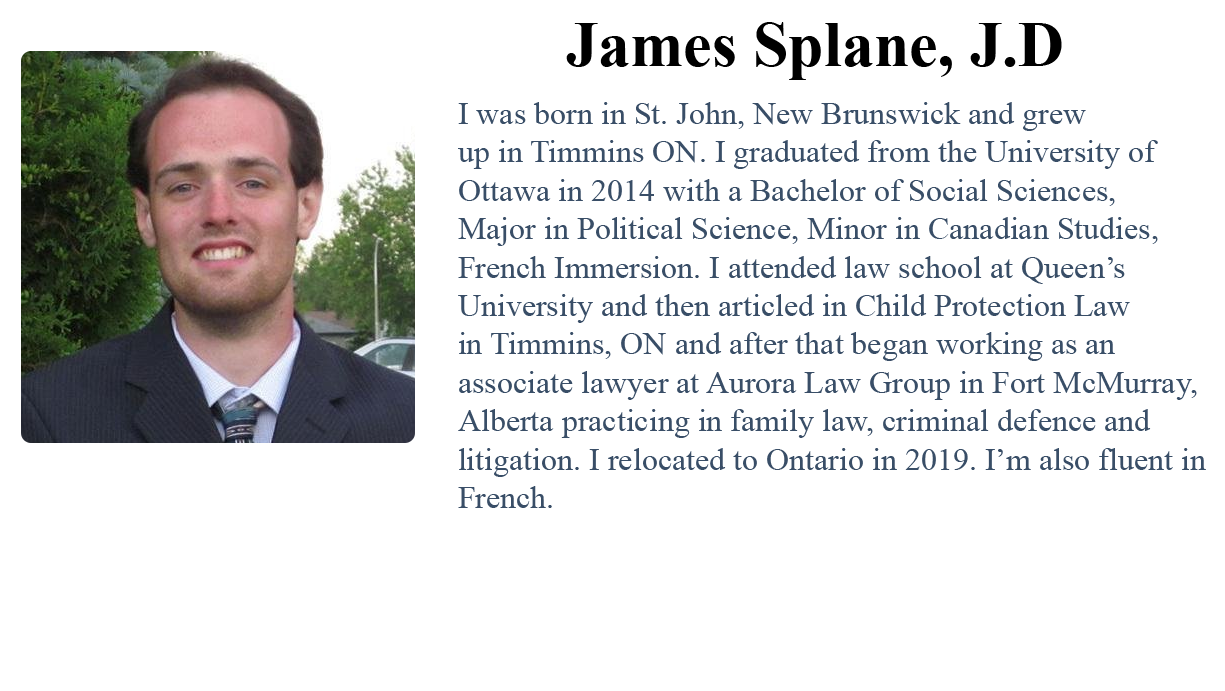
<style>
.page{position:relative;width:1225px;height:691px;background:#ffffff}
.page>*{position:absolute;margin:0}
.t1{font:64px "TimesNewRomanPS-BoldMT";color:#000000}
.t2{font:32px "TimesNewRomanPSMT";color:#394e67}
</style>
<div class="page">
<p class="t1" style="left:566px;top:22px;width:496px;height:58px">James Splane, J.D</p>
<p class="t2" style="left:458px;top:102px;width:748px;height:406px">I was born in St. John, New Brunswick and grew<br>up in Timmins ON. I graduated from the University of <br>Ottawa in 2014 with a Bachelor of Social Sciences, <br>Major in Political Science, Minor in Canadian Studies, <br>French Immersion. I attended law school at Queen’s <br>University and then articled in Child Protection Law <br>in Timmins, ON and after that began working as an <br>associate lawyer at Aurora Law Group in Fort McMurray,<br>Alberta practicing in family law, criminal defence and <br>litigation. I relocated to Ontario in 2019. I’m also fluent in<br>French.</p>
</div>
